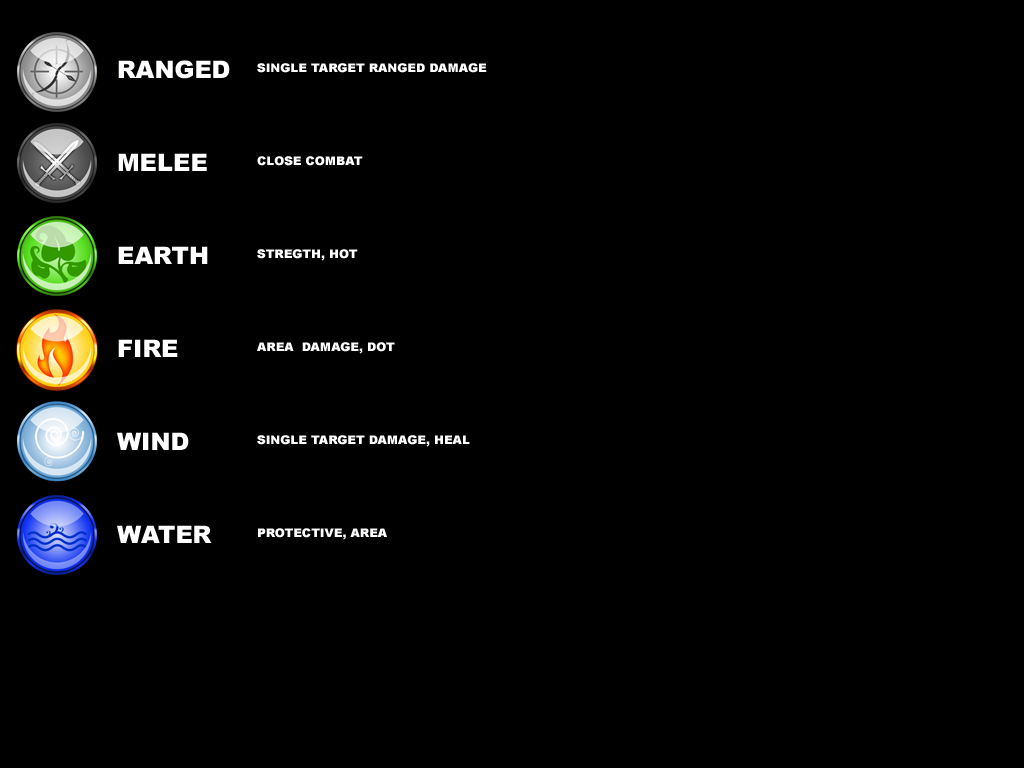
<style>
.page{position:relative;width:1024px;height:768px;background:#000000}
.page>*{position:absolute;margin:0}
.t1{font:24px/93px "Arial-Black";color:#ffffff;text-transform:uppercase}
.t2{font:12px/93px "Arial-Black";color:#ffffff;text-transform:uppercase}
</style>
<div class="page">
<p class="t1" style="left:117px;top:60px;width:113px;height:483px">Ranged<br>Melee<br>Earth<br>Fire<br>WIND<br>Water</p>
<p class="t2" style="left:257px;top:63px;width:230px;height:477px">Single target ranged damage<br>close combat<br>stregth, hot<br>area  damage, dot<br>single target damage, heal<br>protective, area</p>
</div>
